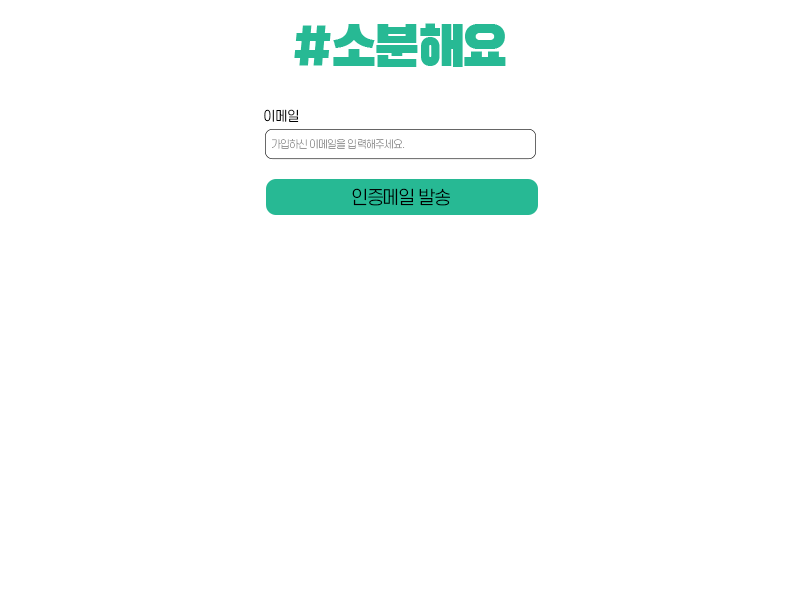
<style>
.page{position:relative;width:800px;height:600px;background:#ffffff}
.page>*{position:absolute;margin:0}
.t1{font:13.2px "S-CoreDream-3Light";letter-spacing:-0.075em;color:#000000}
.t2{font:10.3px "S-CoreDream-2ExtraLight";letter-spacing:-0.075em;color:#999999}
.t3{font:18px "S-CoreDream-3Light";letter-spacing:-0.075em;color:#000000}
</style>
<div class="page">
<p class="t1" style="left:264px;top:109px;width:35px;height:13px">이메일</p>
<p class="t2" style="left:272px;top:139px;width:133px;height:10px">가입하신 이메일을 입력해주세요.</p>
<p class="t3" style="left:352px;top:188px;width:98px;height:18px">인증메일 발송</p>
</div>
